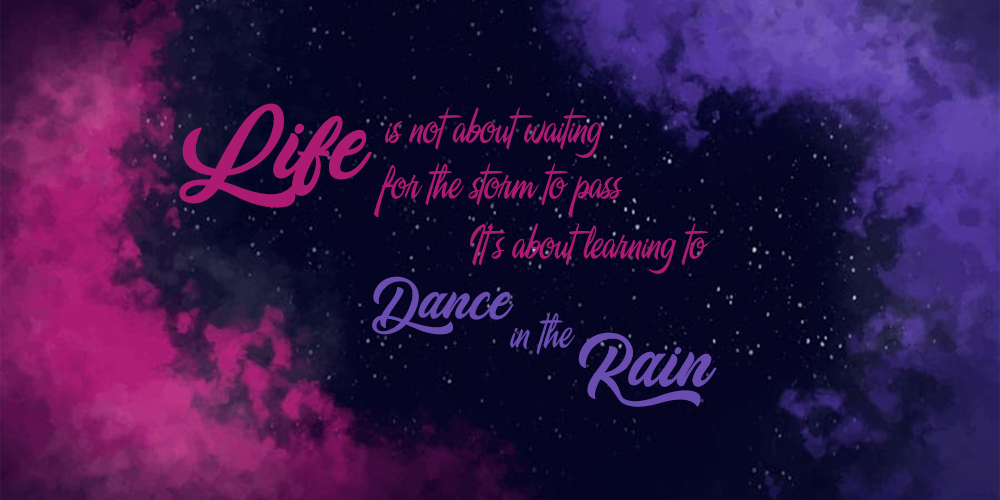
<style>
.page{position:relative;width:1000px;height:500px}
.page>*{position:absolute;margin:0}
.t1{font:128.2px "Cheetah-Kick---Personal-Use";color:#ab1b72}
.t2{font:48px "UTM-A&S-Signwriter";color:#ab1b72}
.t3{font:72px "Cheetah-Kick---Personal-Use";color:#694db2}
.t4{font:48px "UTM-A&S-Signwriter";color:#694db2}
.t5{font:93.1px "Cheetah-Kick---Personal-Use";color:#694db2}
</style>
<div class="page">
<p class="t1" style="left:179px;top:103px;width:193px;height:105px">Life</p>
<p class="t2" style="left:385px;top:107px;width:218px;height:51px">is not about waiting</p>
<p class="t2" style="left:374px;top:163px;width:249px;height:55px">for the storm to pass</p>
<p class="t2" style="left:470px;top:223px;width:239px;height:51px">It’s about learning to</p>
<p class="t3" style="left:372px;top:276px;width:142px;height:59px">Dance</p>
<p class="t4" style="left:510px;top:312px;width:65px;height:43px">in the</p>
<p class="t5" style="left:578px;top:332px;width:139px;height:75px">Rain</p>
</div>
